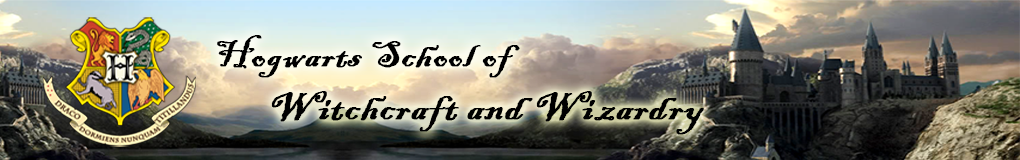
<style>
.page{position:relative;width:1020px;height:160px}
.page>*{position:absolute;margin:0}
.t1{font:37.3px "BlackadderITC-Regular";color:#000000;font-weight:bold;scale:1.12 1}
.t2{font:40.9px "BlackadderITC-Regular";color:#000000;font-weight:bold;scale:1.12 1}
</style>
<div class="page">
<p class="t1" style="left:217px;top:35px;width:303px;height:43px">Hogwarts School of</p>
<p class="t2" style="left:271px;top:91px;width:433px;height:44px">Witchcraft and Wizardry</p>
</div>
